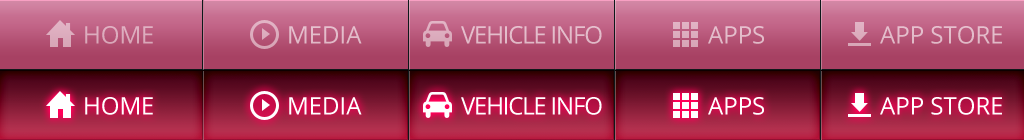
<style>
.page{position:relative;width:1024px;height:140px}
.page>*{position:absolute;margin:0}
.t1{font:24px "OpenSans";color:#dcacbe;text-transform:uppercase}
.t2{font:24px "OpenSans";color:#e3bcca;text-transform:uppercase}
.t3{font:24px "OpenSans";letter-spacing:-0.05em;color:#e3bdcb;text-transform:uppercase}
.t4{font:24px "OpenSans";color:#e3bdcb;text-transform:uppercase}
.t5{font:24px "OpenSans";color:#ffffff;text-transform:uppercase}
.t6{font:24px "OpenSans";letter-spacing:-0.05em;color:#ffffff;text-transform:uppercase}
</style>
<div class="page">
<p class="t1" style="left:85px;top:26px;width:68px;height:18px">Home</p>
<p class="t2" style="left:289px;top:26px;width:73px;height:18px">Media</p>
<p class="t3" style="left:461px;top:26px;width:141px;height:18px">Vehicle info</p>
<p class="t4" style="left:708px;top:26px;width:56px;height:18px">Apps</p>
<p class="t4" style="left:880px;top:26px;width:122px;height:18px">App Store</p>
<p class="t5" style="left:85px;top:97px;width:68px;height:18px">Home</p>
<p class="t5" style="left:289px;top:97px;width:73px;height:18px">Media</p>
<p class="t6" style="left:461px;top:97px;width:141px;height:18px">Vehicle info</p>
<p class="t5" style="left:708px;top:97px;width:56px;height:18px">Apps</p>
<p class="t5" style="left:880px;top:97px;width:122px;height:18px">App Store</p>
</div>
